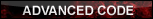
<style>
.page{position:relative;width:153px;height:19px}
.page>*{position:absolute;margin:0}
.t1{font:12.7px "Arial-BoldMT";color:#ffffff}
</style>
<div class="page">
<p class="t1" style="left:22px;top:5px;width:112px;height:11px">ADVANCED CODE</p>
</div>
